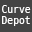
<style>
.page{position:relative;width:32px;height:32px;background:#444444}
.page>*{position:absolute;margin:0}
.t1{font:11px/11px "HackGen-Regular";color:#ffffff}
</style>
<div class="page">
<p class="t1" style="left:2px;top:5px;width:29px;height:21px">Curve<br>Depot</p>
</div>
